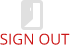
<style>
.page{position:relative;width:70px;height:45px;background:#ffffff}
.page>*{position:absolute;margin:0}
.t1{font:15px "OpenSans";color:#cb1717}
</style>
<div class="page">
<p class="t1" style="left:0px;top:33px;width:70px;height:12px">SIGN OUT</p>
</div>
